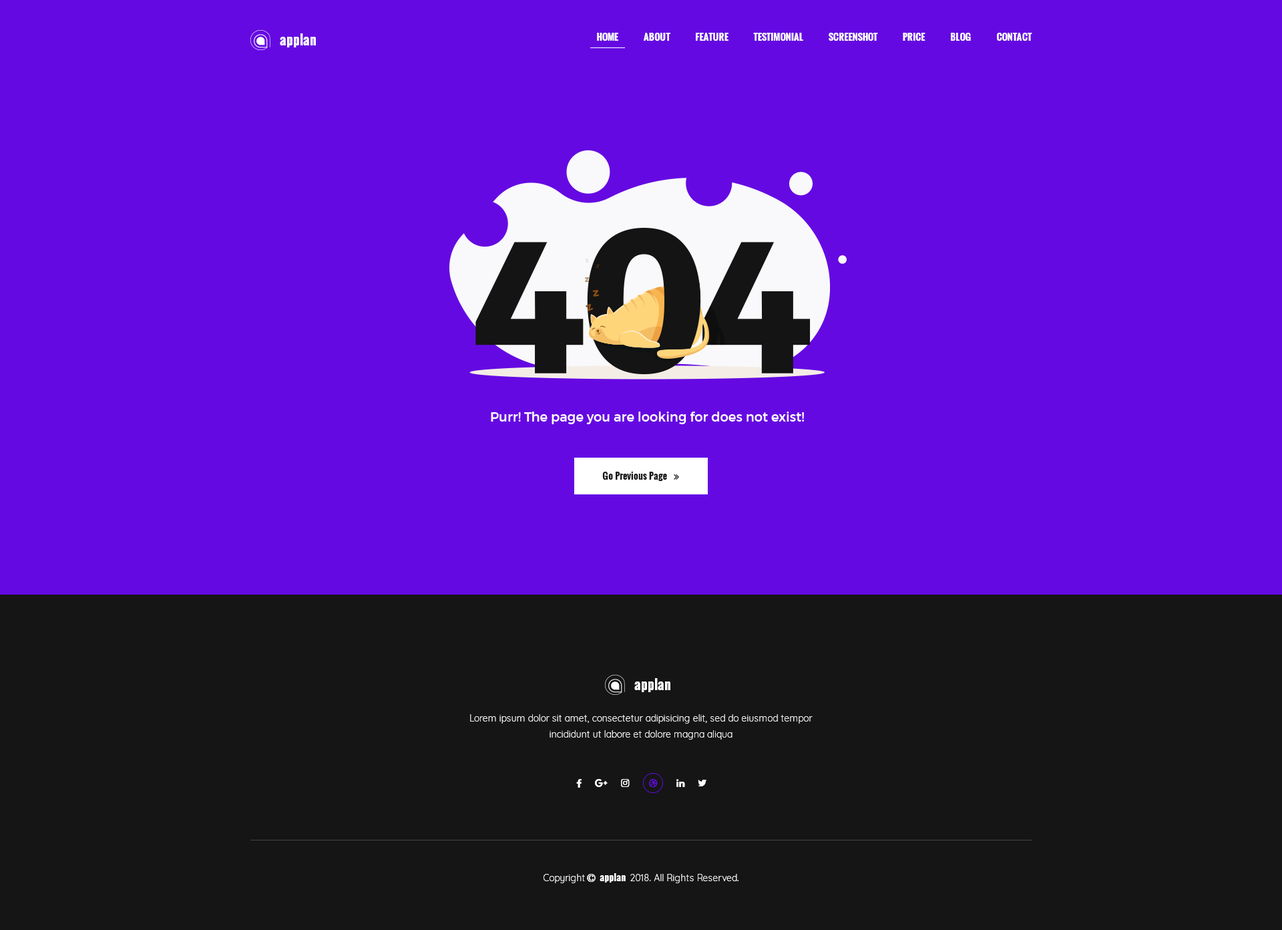
<style>
.page{position:relative;width:1282px;height:930px;background:#6509e2}
.page>*{position:absolute;margin:0}
.t1{font:13.4px "Oswald-Bold";color:#ffffff}
.t2{font:9.4px "Oswald-Bold";letter-spacing:0.01em;color:#ffffff;text-transform:uppercase}
.t3{font:9.4px "Oswald-Bold";color:#151515}
.t4{font:9.4px/16px "Quicksand-Regular";color:#f9f9f9}
</style>
<div class="page">
<p class="t1" style="left:280px;top:33px;width:36px;height:14px">applan</p>
<p class="t2" style="left:597px;top:33px;width:436px;height:8px">Home            About            Feature            Testimonial            Screenshot            Price            Blog            Contact</p>
<p class="t3" style="left:602px;top:472px;width:65px;height:9px">Go Previous Page</p>
<p class="t1" style="left:635px;top:678px;width:36px;height:14px">applan</p>
<p class="t4" style="left:470px;top:714px;width:343px;height:25px;text-align:center">Lorem ipsum dolor sit amet, consectetur adipisicing elit, sed do eiusmod tempor incididunt ut labore et dolore magna aliqua</p>
</div>
